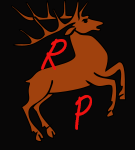
<style>
.page{position:relative;width:135px;height:150px;background:#080707}
.page>*{position:absolute;margin:0}
.t1{font:45.8px "FreestyleScript-Regular";color:#ee1111}
</style>
<div class="page">
<p class="t1" style="left:41px;top:38px;width:26px;height:32px">R</p>
<p class="t1" style="left:75px;top:95px;width:17px;height:35px;rotate:-17deg">P</p>
</div>
